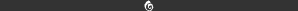
<style>
.page{position:relative;width:298px;height:11px;background:#333333}
.page>*{position:absolute;margin:0}
.t1{font:28px "Gigi-Regular";color:#ffffff}
</style>
<div class="page">
<p class="t1" style="left:144px;top:0px;width:10px;height:11px">o</p>
</div>
